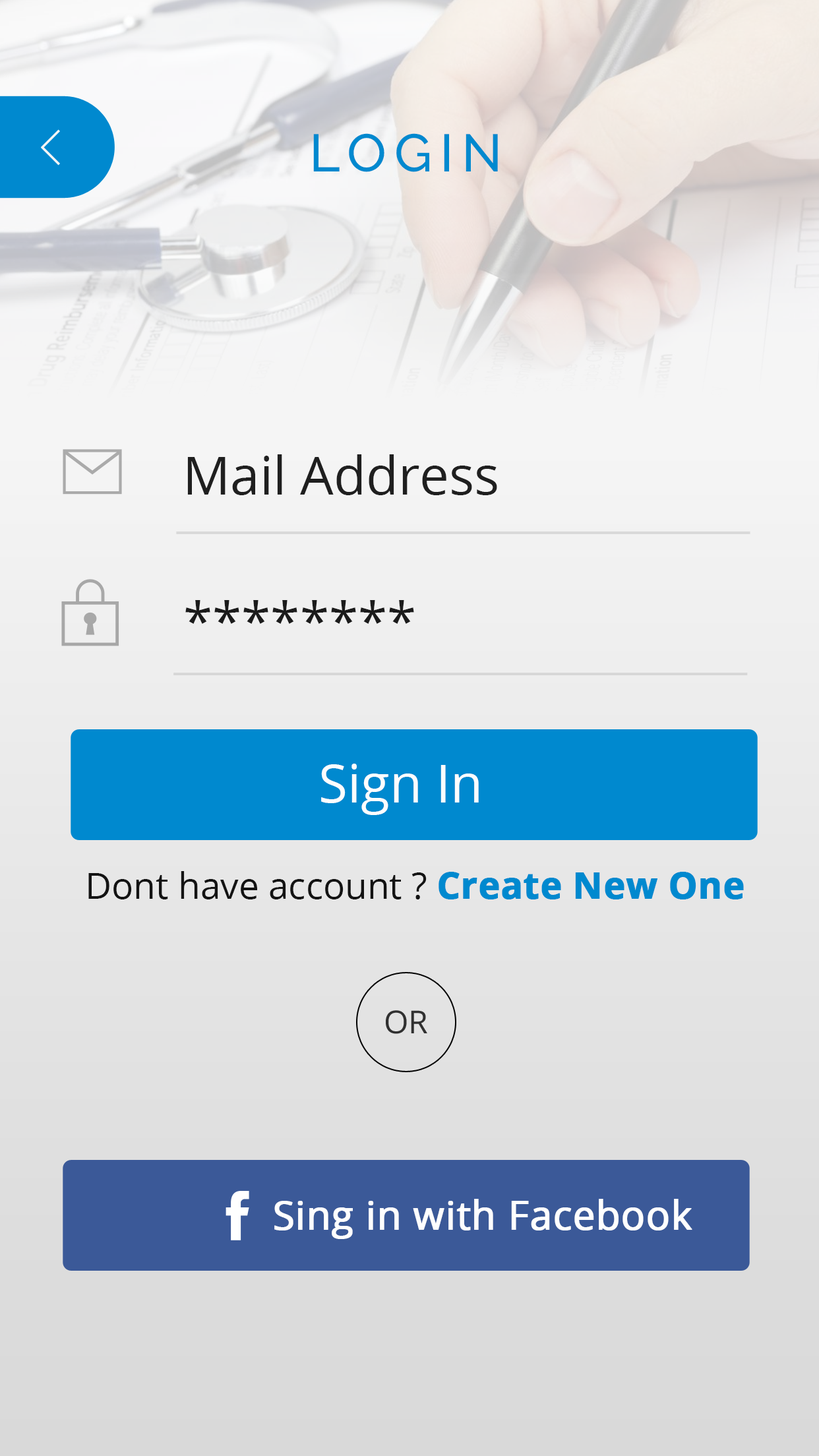
<style>
.page{position:relative;width:819px;height:1456px}
.page>*{position:absolute;margin:0}
.t1{font:52.8px "Raleway-Medium";letter-spacing:0.15em;color:#0089cf}
.t2{font:52.8px "OpenSans";color:#1b1b1b}
.t3{font:52.8px "OpenSans";color:#fefdfd}
.t4{font:36.3px "OpenSans";color:#131313}
.t5{font:36.3px "OpenSans-Bold";color:#0089cf;font-weight:bold}
.t6{font:39.6px "OpenSans";color:#fefefe;font-weight:bold}
</style>
<div class="page">
<p class="t1" style="left:313px;top:133px;width:185px;height:39px">LOGIN</p>
<p class="t2" style="left:187px;top:454px;width:310px;height:41px">Mail Address</p>
<p class="t2" style="left:185px;top:600px;width:229px;height:24px">********</p>
<p class="t3" style="left:321px;top:764px;width:158px;height:51px">Sign In</p>
<p class="t4" style="left:88px;top:871px;width:339px;height:28px">Dont have account ?</p>
<p class="t5" style="left:439px;top:872px;width:305px;height:27px">Create New One</p>
<p class="t6" style="left:274px;top:1199px;width:418px;height:40px">Sing in with Facebook</p>
</div>
